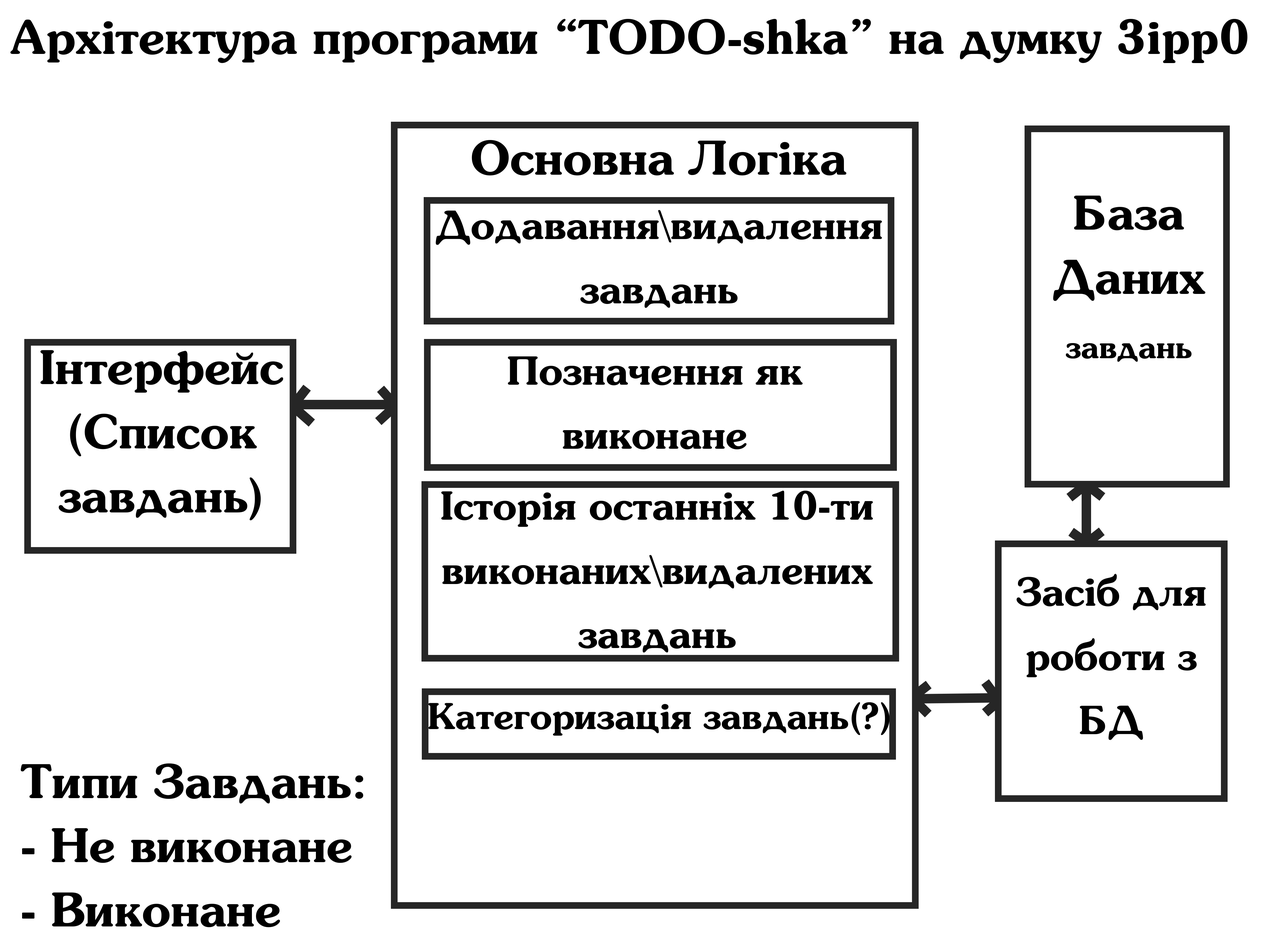
<style>
.page{position:relative;width:1261px;height:946px;background:#ffffff}
.page>*{position:absolute;margin:0}
.t1{font:47.3px "SouvenirLtBTRusbyme-Demi";color:#000000}
.t2{font:47.3px/64.2px "SouvenirLtBTRusbyme-Demi";color:#000000}
.t3{font:31.5px/64.2px "SouvenirLtBTRusbyme-Demi";color:#000000}
.t4{font:39.4px/64.2px "SouvenirLtBTRusbyme-Demi";color:#000000}
.t5{font:36.3px "SouvenirLtBTRusbyme-Demi";color:#000000}
</style>
<div class="page">
<p class="t1" style="left:10px;top:19px;width:1237px;height:44px">Архітектура програми “TODO-shka” на думку 3ipp0</p>
<p class="t1" style="left:472px;top:140px;width:374px;height:36px">Основна Логіка</p>
<p class="t2" style="left:1053px;top:195px;width:152px;height:167px;text-align:center">База Даних<br><span class="t3">завдань</span></p>
<p class="t4" style="left:436px;top:210px;width:446px;height:98px;text-align:center">Додавання\видалення завдань</p>
<p class="t2" style="left:40px;top:350px;width:243px;height:170px;text-align:center">Інтерфейс (Список завдань)</p>
<p class="t4" style="left:508px;top:356px;width:295px;height:93px;text-align:center">Позначення як виконане</p>
<p class="t4" style="left:441px;top:490px;width:432px;height:163px;text-align:center">Історія останніх 10-ти виконаних\видалених завдань</p>
<p class="t4" style="left:1016px;top:573px;width:190px;height:167px;text-align:center">Засіб для роботи з БД</p>
<p class="t5" style="left:428px;top:702px;width:462px;height:33px">Категоризація завдань(?)</p>
<p class="t2" style="left:20px;top:763px;width:343px;height:164px">Типи Завдань:<br>- Не виконане<br>- Виконане</p>
</div>
